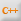
<style>
.page{position:relative;width:21px;height:21px;background:#dedede}
.page>*{position:absolute;margin:0}
.t1{font:8.5px "TimesNewRomanPS-BoldMT";color:#f57f06}
</style>
<div class="page">
<p class="t1" style="left:2px;top:7px;width:17px;height:7px">C++</p>
</div>
